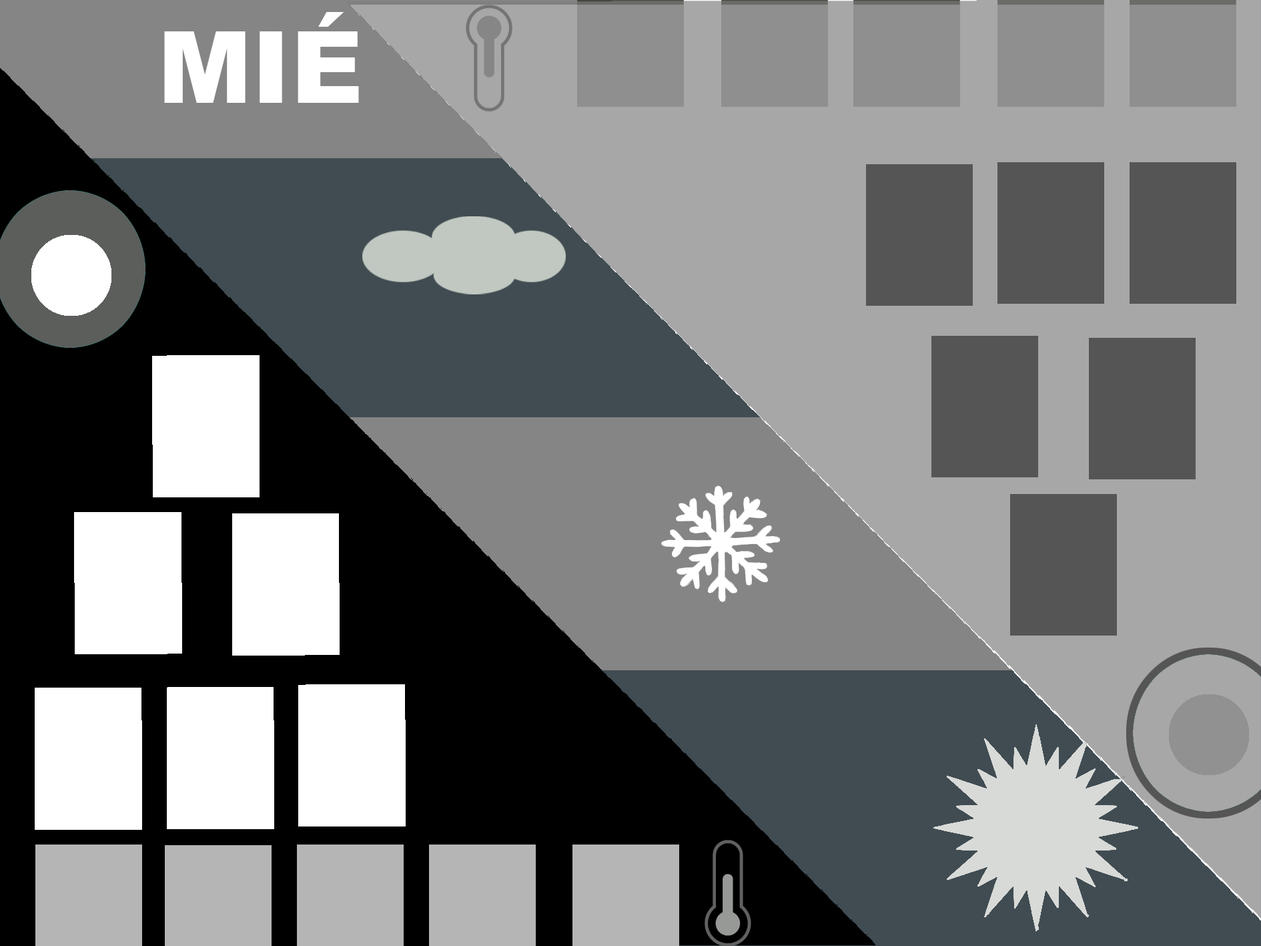
<style>
.page{position:relative;width:1261px;height:946px;background:#a6a7a6}
.page>*{position:absolute;margin:0}
.t1{font:100.1px "Arial-Black";color:#ffffff}
</style>
<div class="page">
<p class="t1" style="left:164px;top:12px;width:195px;height:91px">MIÉ</p>
</div>
